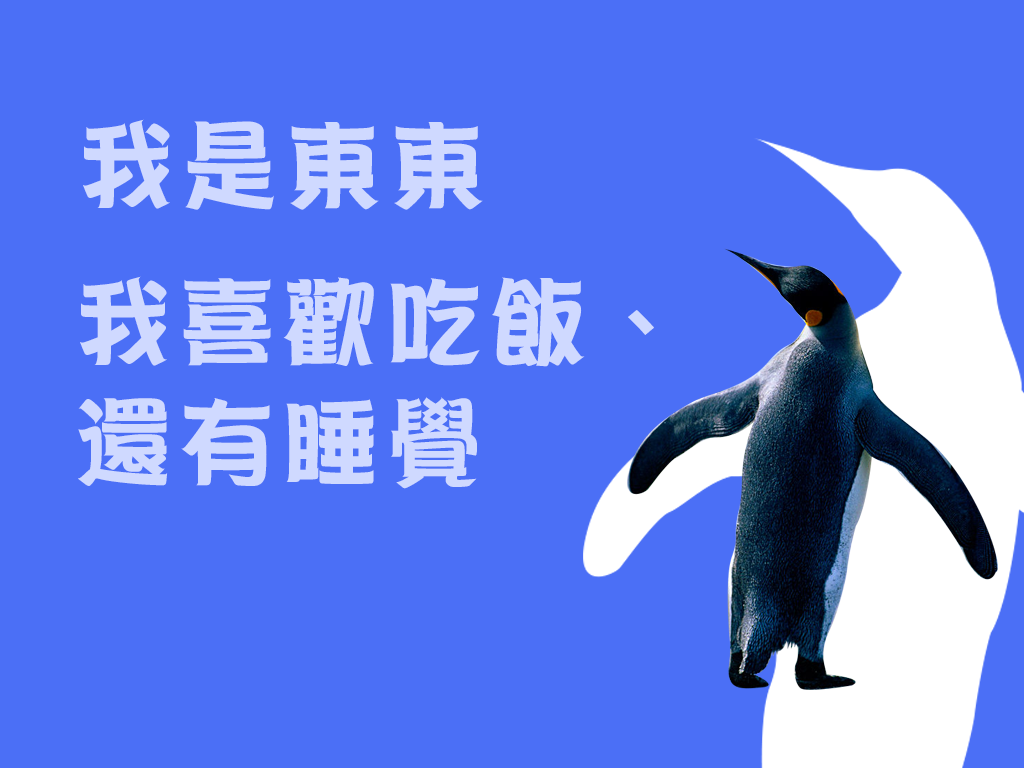
<style>
.page{position:relative;width:1024px;height:768px;background:#4b6ff6}
.page>*{position:absolute;margin:0}
.t1{font:96px "DFPOP2-W9-WINP-BF";letter-spacing:0.08em;color:#cfd9ff}
.t2{font:96px/120px "DFPOP2-W9-WINP-BF";letter-spacing:0.08em;color:#cfd9ff}
</style>
<div class="page">
<p class="t1" style="left:83px;top:119px;width:400px;height:91px">我是東東</p>
<p class="t2" style="left:78px;top:276px;width:576px;height:213px">我喜歡吃飯、<br>還有睡覺</p>
</div>
